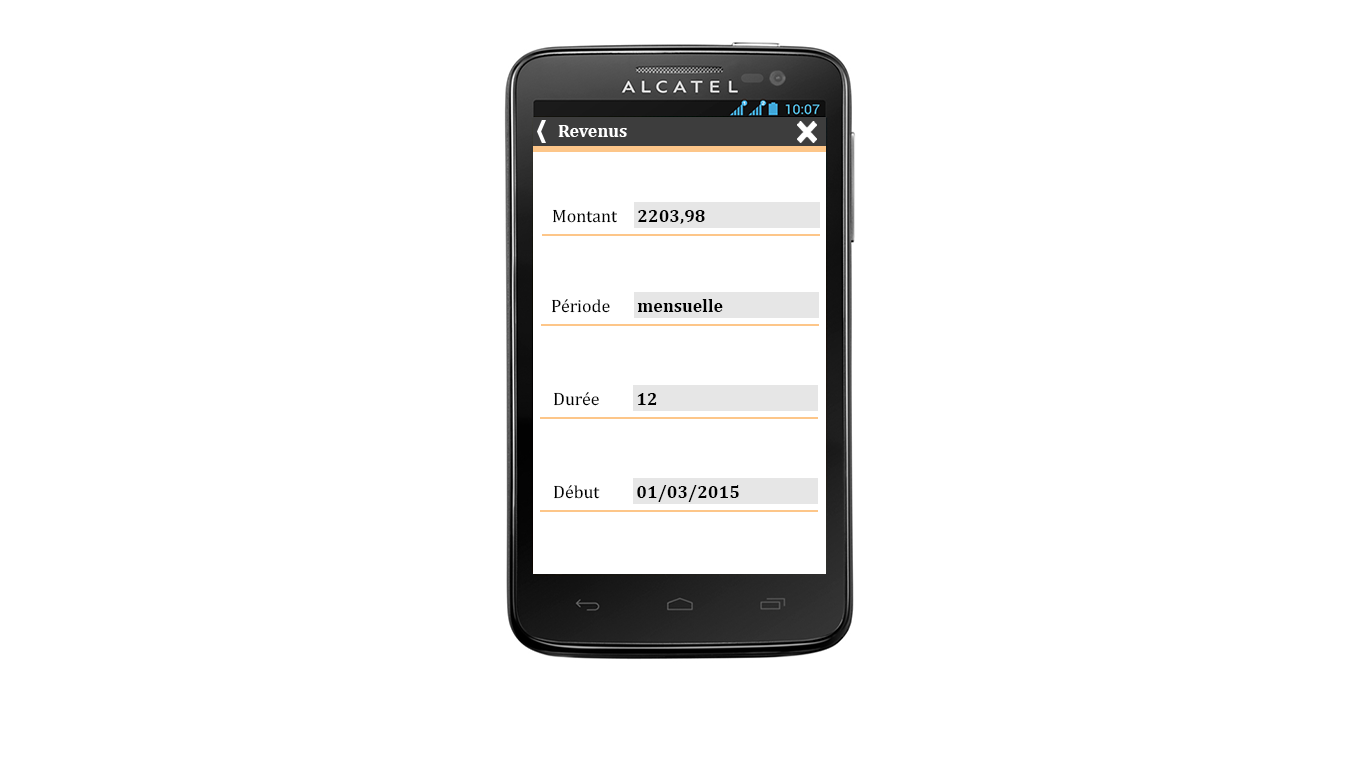
<style>
.page{position:relative;width:1366px;height:768px;background:#ffffff}
.page>*{position:absolute;margin:0}
.t1{font:18px "Cambria-Bold";color:#ffffff}
.t2{font:18px "Cambria";color:#000000}
.t3{font:18px "Cambria-Bold";color:#000000}
</style>
<div class="page">
<p class="t1" style="left:558px;top:125px;width:69px;height:12px">Revenus</p>
<p class="t2" style="left:553px;top:209px;width:64px;height:14px">Montant</p>
<p class="t3" style="left:638px;top:210px;width:67px;height:14px">2203,98</p>
<p class="t2" style="left:552px;top:299px;width:58px;height:14px">Période</p>
<p class="t3" style="left:637px;top:299px;width:86px;height:13px">mensuelle</p>
<p class="t2" style="left:554px;top:392px;width:45px;height:14px">Durée</p>
<p class="t3" style="left:637px;top:393px;width:20px;height:12px">12</p>
<p class="t2" style="left:554px;top:485px;width:46px;height:14px">Début</p>
<p class="t3" style="left:637px;top:485px;width:102px;height:17px">01/03/2015</p>
</div>
